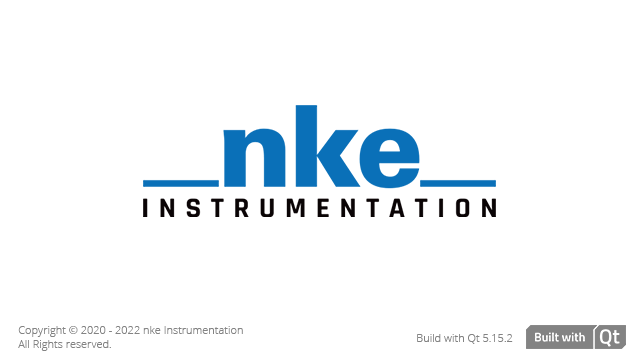
<style>
.page{position:relative;width:640px;height:360px;background:#ffffff}
.page>*{position:absolute;margin:0}
.t1{font:11px "OpenSans-Light";color:#838383}
</style>
<div class="page">
<p class="t1" style="left:18px;top:326px;width:225px;height:25px">Copyright © 2020 - 2022 nke Instrumentation<br>All Rights reserved.</p>
<p class="t1" style="left:417px;top:334px;width:96px;height:10px">Build with Qt 5.15.2</p>
</div>
